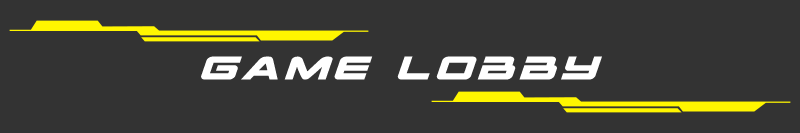
<style>
.page{position:relative;width:800px;height:133px;background:#333333}
.page>*{position:absolute;margin:0}
.t1{font:45.5px "SpaceRangerExpandedItalic";letter-spacing:0.1em;color:#ffffff}
</style>
<div class="page">
<p class="t1" style="left:201px;top:56px;width:401px;height:24px">Game Lobby</p>
</div>
